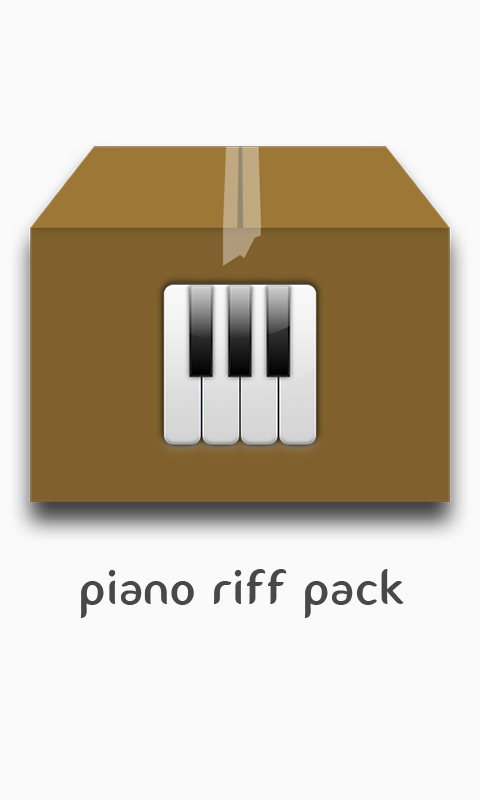
<style>
.page{position:relative;width:480px;height:800px;background:#fafafa}
.page>*{position:absolute;margin:0}
.t1{font:48px "Fontastique";letter-spacing:0.01em;color:#484848}
</style>
<div class="page">
<p class="t1" style="left:80px;top:569px;width:324px;height:49px">piano riff pack</p>
</div>
